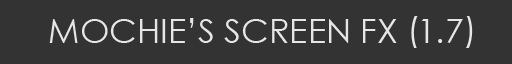
<style>
.page{position:relative;width:512px;height:64px;background:#333333}
.page>*{position:absolute;margin:0}
.t1{font:34px "CenturyGothic";color:#e6e6e6}
</style>
<div class="page">
<p class="t1" style="left:49px;top:18px;width:414px;height:25px">MOCHIE’S SCREEN FX  1.7</p>
</div>
